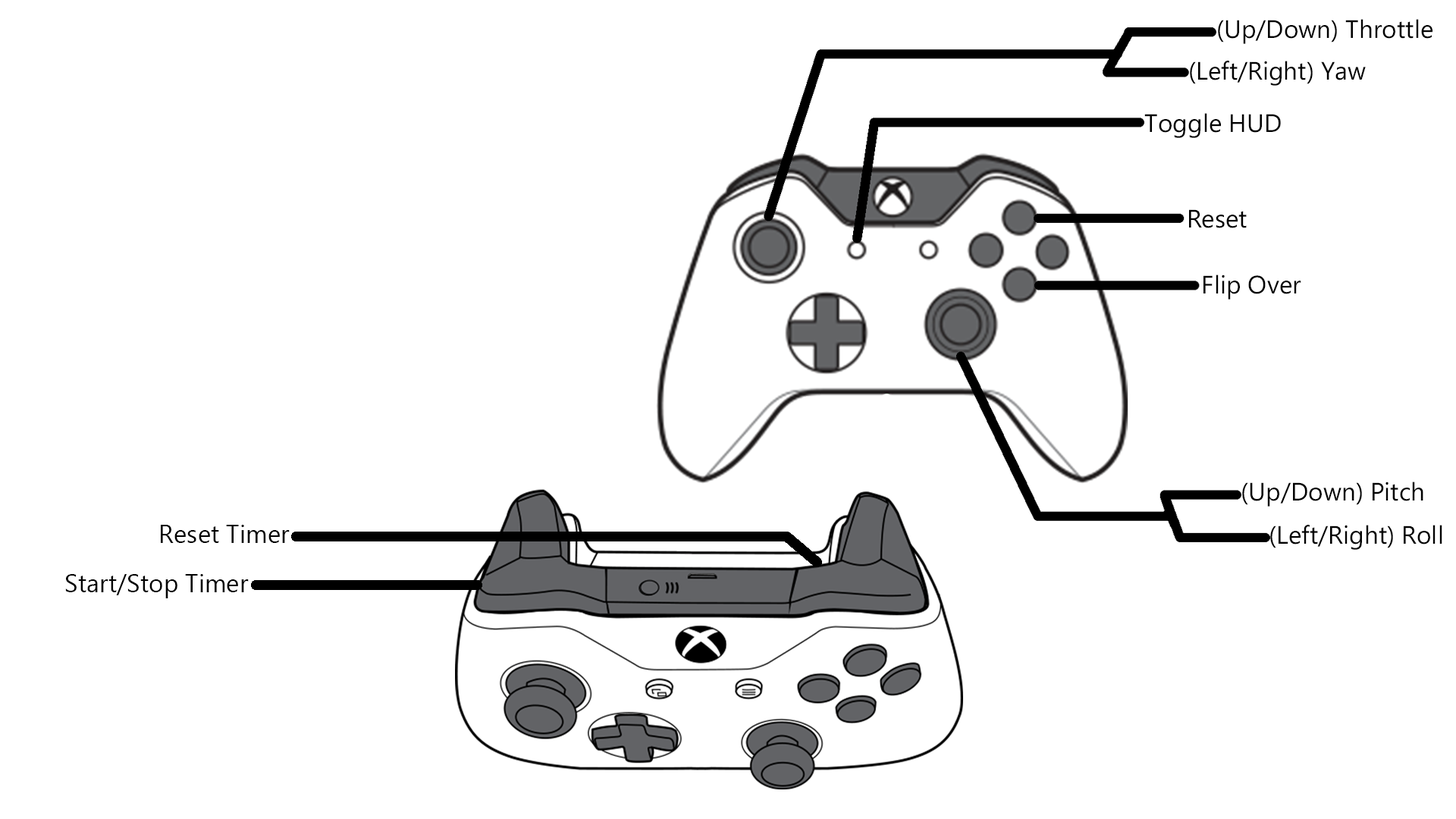
<style>
.page{position:relative;width:1456px;height:819px;background:#ffffff}
.page>*{position:absolute;margin:0}
.t1{font:25.3px "MicrosoftTaiLe";color:#000000}
</style>
<div class="page">
<p class="t1" style="left:1218px;top:19px;width:214px;height:25px">(Up/Down) Throttle</p>
<p class="t1" style="left:1190px;top:61px;width:176px;height:25px">(Left/Right) Yaw</p>
<p class="t1" style="left:1144px;top:113px;width:137px;height:25px">Toggle HUD</p>
<p class="t1" style="left:1189px;top:209px;width:58px;height:19px">Reset</p>
<p class="t1" style="left:1203px;top:275px;width:98px;height:25px">Flip Over</p>
<p class="t1" style="left:1242px;top:482px;width:181px;height:25px">(Up/Down) Pitch</p>
<p class="t1" style="left:161px;top:525px;width:129px;height:18px">Reset Timer</p>
<p class="t1" style="left:1270px;top:525px;width:172px;height:25px">(Left/Right) Roll</p>
<p class="t1" style="left:65px;top:574px;width:184px;height:24px">Start/Stop Timer</p>
</div>
